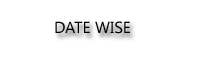
<style>
.page{position:relative;width:200px;height:60px;background:#ffffff}
.page>*{position:absolute;margin:0}
.t1{font:16px "SegoeUISymbol";color:#000000}
</style>
<div class="page">
<p class="t1" style="left:55px;top:21px;width:75px;height:13px">DATE WISE</p>
</div>
